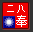
<style>
.page{position:relative;width:33px;height:32px;background:#f20000}
.page>*{position:absolute;margin:0}
.t1{font:10.4px "SimSun";color:#ffffff}
.t2{font:11.7px "SimSun";color:#ffffff}
</style>
<div class="page">
<p class="t1" style="left:7px;top:5px;width:18px;height:8px">二八</p>
<p class="t2" style="left:16px;top:15px;width:11px;height:12px">奉</p>
</div>
